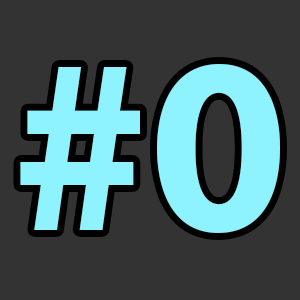
<style>
.page{position:relative;width:300px;height:300px;background:#333333}
.page>*{position:absolute;margin:0}
.t1{font:251px "MyriadPro-Bold";color:#8ef3ff}
</style>
<div class="page">
<p class="t1" style="left:20px;top:64px;width:260px;height:169px">#0</p>
</div>
